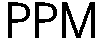
<style>
.page{position:relative;width:104px;height:40px;background:#ffffff}
.page>*{position:absolute;margin:0}
.t1{font:50px "Tuffy";color:#000000}
</style>
<div class="page">
<p class="t1" style="left:8px;top:2px;width:87px;height:36px">PPM</p>
</div>
